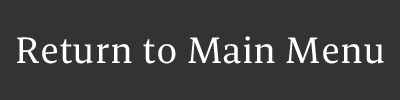
<style>
.page{position:relative;width:400px;height:100px;background:#333333}
.page>*{position:absolute;margin:0}
.t1{font:36.5px "BespokeSerif-Regular";color:#ffffff}
</style>
<div class="page">
<p class="t1" style="left:17px;top:36px;width:367px;height:28px">Return to Main Menu</p>
</div>
